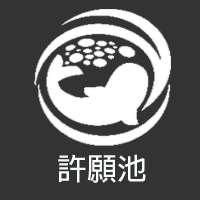
<style>
.page{position:relative;width:200px;height:200px;background:#333333}
.page>*{position:absolute;margin:0}
.t1{font:30px "AdobeFanHeitiStd-Bold";color:#f8fdfb}
</style>
<div class="page">
<p class="t1" style="left:58px;top:154px;width:88px;height:29px">許願池</p>
</div>
